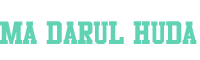
<style>
.page{position:relative;width:200px;height:60px;background:#ffffff}
.page>*{position:absolute;margin:0}
.t1{font:28px "Athletic";color:#61d2b4}
</style>
<div class="page">
<p class="t1" style="left:0px;top:21px;width:197px;height:23px">MA Darul Huda</p>
</div>
